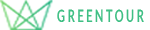
<style>
.page{position:relative;width:150px;height:30px;background:#ffffff}
.page>*{position:absolute;margin:0}
.t1{font:17.3px "Lato-Bold";letter-spacing:0.2em;color:#3fbf84;scale:0.66 1}
</style>
<div class="page">
<p class="t1" style="left:57px;top:9px;width:87px;height:13px">GREENTOUR</p>
</div>
